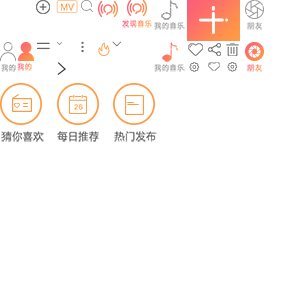
<style>
.page{position:relative;width:300px;height:300px;background:#ffffff}
.page>*{position:absolute;margin:0}
.t1{font:8px "FZLTHJW--GB1-0";letter-spacing:0.02em;color:#ff9a44}
.t2{font:6.8px "FZLTHJW--GB1-0";letter-spacing:0.1em;color:#fc6177}
.t3{font:6.8px "FZLTHJW--GB1-0";letter-spacing:0.1em;color:#999999}
.t4{font:6.8px "FZLTHJW--GB1-0";letter-spacing:0.1em;color:#fe8358}
.t5{font:6.8px "FZLTHJW--GB1-0";letter-spacing:0.1em;color:#fe924c}
.t6{font:6.3px "FZLTHJW--GB1-0";letter-spacing:0.1em;color:#ff9a44}
.t7{font:10.2px "FZLTHJW--GB1-0";letter-spacing:0.02em;color:#636363}
</style>
<div class="page">
<p class="t1" style="left:61px;top:3px;width:14px;height:8px">MV</p>
<p class="t2" style="left:122px;top:20px;width:30px;height:8px">发现音乐</p>
<p class="t3" style="left:154px;top:22px;width:31px;height:8px">我的音乐</p>
<p class="t3" style="left:247px;top:22px;width:15px;height:8px">朋友</p>
<p class="t3" style="left:1px;top:64px;width:15px;height:8px">我的</p>
<p class="t4" style="left:17px;top:63px;width:15px;height:8px">我的</p>
<p class="t3" style="left:154px;top:64px;width:31px;height:8px">我的音乐</p>
<p class="t5" style="left:247px;top:64px;width:15px;height:8px">朋友</p>
<p class="t6" style="left:74px;top:104px;width:9px;height:6px">26</p>
<p class="t7" style="left:1px;top:131px;width:43px;height:11px">猜你喜欢</p>
<p class="t7" style="left:57px;top:131px;width:42px;height:11px">每日推荐</p>
<p class="t7" style="left:114px;top:131px;width:43px;height:11px">热门发布</p>
</div>
